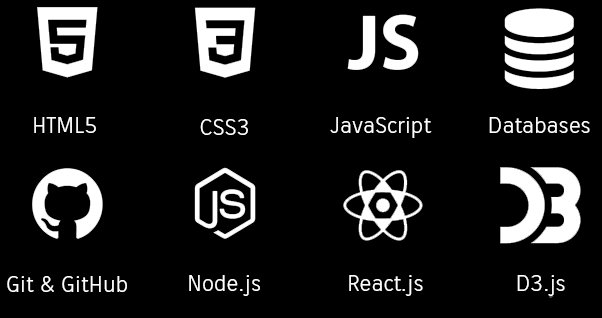
<style>
.page{position:relative;width:602px;height:318px;background:#000000}
.page>*{position:absolute;margin:0}
.t1{font:24px "Lohit-Telugu";color:#ffffff}
</style>
<div class="page">
<p class="t1" style="left:34px;top:117px;width:62px;height:16px">HTML5</p>
<p class="t1" style="left:200px;top:119px;width:48px;height:16px">CSS3</p>
<p class="t1" style="left:330px;top:117px;width:102px;height:21px">JavaScript</p>
<p class="t1" style="left:489px;top:117px;width:101px;height:16px">Databases</p>
<p class="t1" style="left:7px;top:276px;width:120px;height:16px">Git &amp; GitHub</p>
<p class="t1" style="left:189px;top:275px;width:71px;height:21px">Node.js</p>
<p class="t1" style="left:349px;top:275px;width:74px;height:21px">React.js</p>
<p class="t1" style="left:517px;top:275px;width:48px;height:21px">D3.js</p>
</div>
